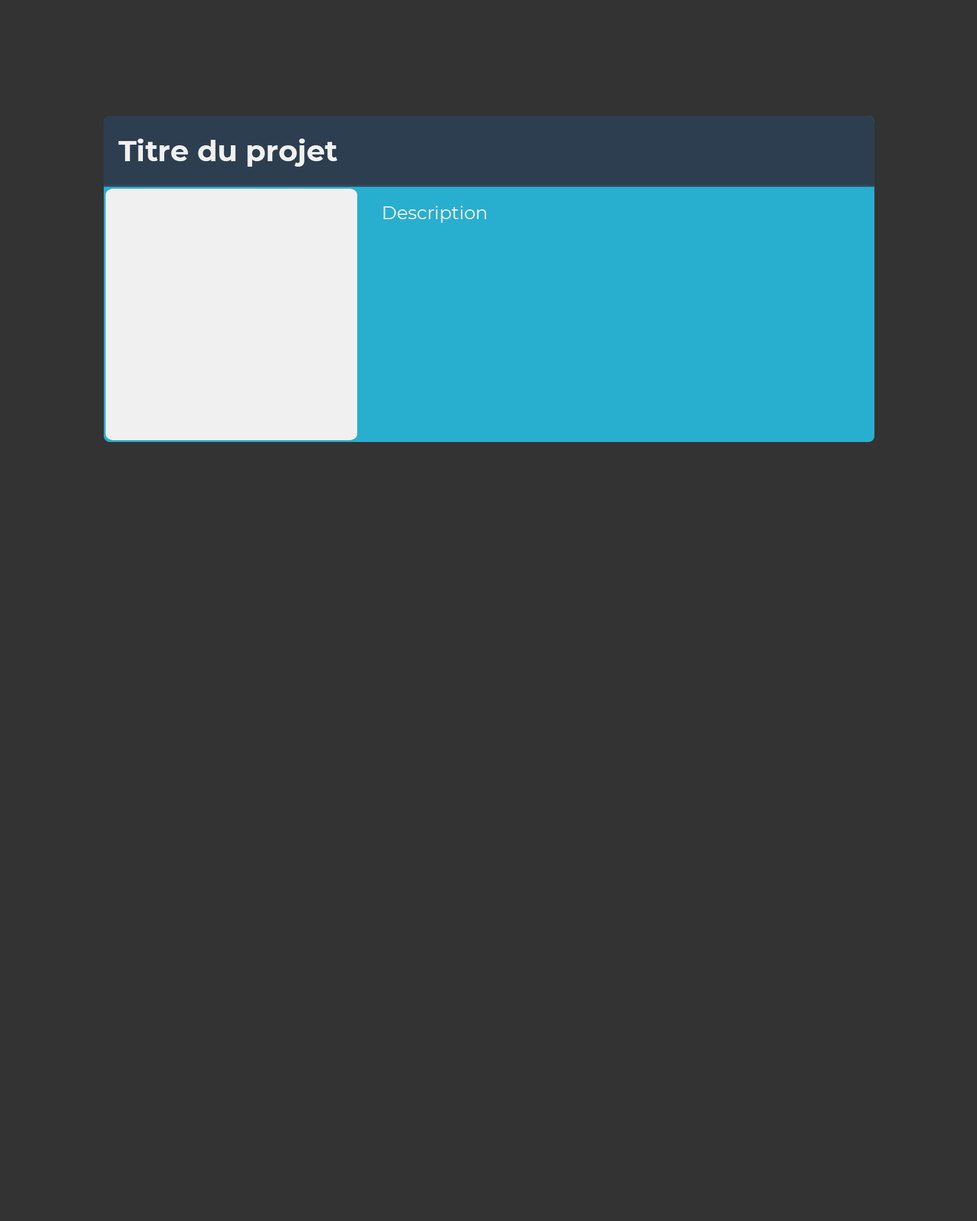
<style>
.page{position:relative;width:977px;height:1221px;background:#333333}
.page>*{position:absolute;margin:0}
.t1{font:29.3px "Montserrat-Bold";color:#f0f0f0}
.t2{font:18.3px "Montserrat-Regular";color:#f0f0f0}
</style>
<div class="page">
<p class="t1" style="left:118px;top:139px;width:220px;height:28px">Titre du projet</p>
<p class="t2" style="left:383px;top:206px;width:104px;height:17px">Description</p>
</div>
